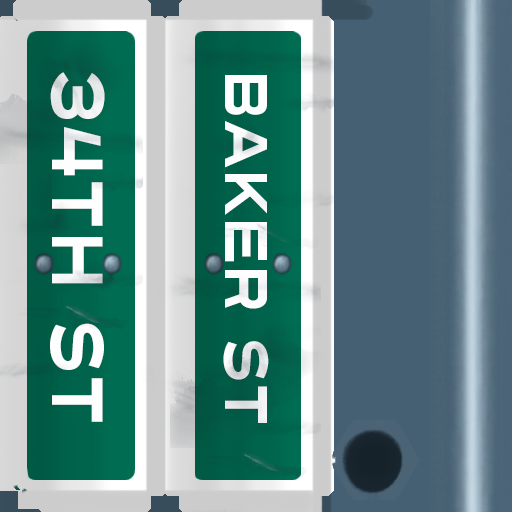
<style>
.page{position:relative;width:512px;height:512px}
.page>*{position:absolute;margin:0}
.t1{font:72px "Turnpike";color:#fefeff;scale:0.75 1}
.t2{font:60px "Turnpike";color:#fefeff;scale:0.75 1}
</style>
<div class="page">
<p class="t1" style="left:50px;top:72px;width:55px;height:350px;rotate:90deg">34th st</p>
<p class="t2" style="left:223px;top:75px;width:46px;height:348px;rotate:90deg">Baker St</p>
</div>
